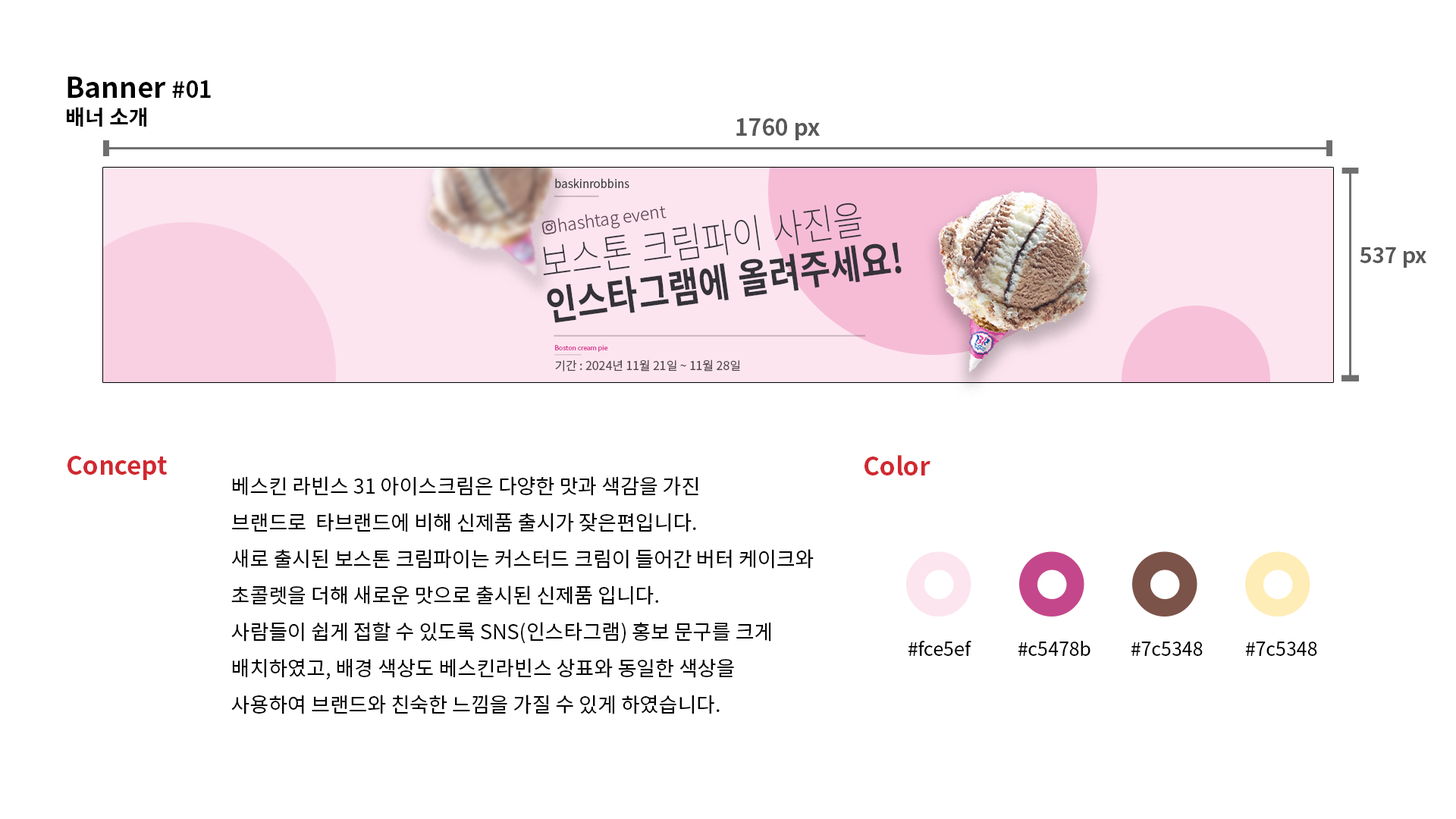
<style>
.page{position:relative;width:1456px;height:819px;background:#ffffff}
.page>*{position:absolute;margin:0}
.t1{font:28.1px/27.3px "NotoSansCJKkr-Bold";color:#000000}
.t2{font:22.7px/27.3px "NotoSansCJKkr-Bold";color:#000000}
.t3{font:21.2px/27.3px "NotoSansCJKkr-Bold";color:#000000}
.t4{font:22.7px "NotoSansCJKkr-Bold";color:#585858}
.t5{font:11.3px "NotoSansCJKkr-Regular";color:#3c3c3c}
.t6{font:40.1px/43.8px "NotoSansCJKkr-Bold";color:#353239;scale:0.83 1}
.t7{font:40.1px/43.8px "NotoSansCJKkr-Thin";color:#353239;scale:0.83 1}
.t8{font:17.2px "NotoSansCJKkr-Light";color:#5a404d}
.t9{font:21.2px "NotoSansCJKkr-Bold";color:#585858}
.t10{font:6.6px "NotoSansCJKkr-Regular";color:#da3c93}
.t11{font:12px "NotoSansCJKkr-Regular";color:#534a4e}
.t12{font:25px "NotoSansCJKkr-Bold";color:#d12830}
.t13{font:20.5px/36.4px "NotoSansCJKkr-Regular";color:#000000}
.t14{font:19px "NotoSansCJKkr-Regular";color:#000000}
</style>
<div class="page">
<p class="t1" style="left:67px;top:77px;width:144px;height:50px">Banner <span class="t2">#01<br></span><span class="t3">배너 소개</span></p>
<p class="t4" style="left:736px;top:118px;width:84px;height:22px">1760 px</p>
<p class="t5" style="left:555px;top:178px;width:74px;height:10px">baskinrobbins</p>
<p class="t6" style="left:543px;top:203px;width:359px;height:120px;rotate:-8deg"><span class="t7">보스톤 크림파이 사진을 <br></span>인스타그램에 올려주세요!</p>
<p class="t8" style="left:557px;top:206px;width:110px;height:26px;rotate:-8deg">hashtag event</p>
<p class="t9" style="left:1360px;top:247px;width:66px;height:21px">537 px</p>
<p class="t10" style="left:555px;top:345px;width:53px;height:7px">Boston cream pie</p>
<p class="t11" style="left:555px;top:359px;width:185px;height:13px">기간 : 2024년 11월 21일 ~ 11월 28일</p>
<p class="t12" style="left:67px;top:456px;width:100px;height:24px">Concept</p>
<p class="t12" style="left:864px;top:455px;width:66px;height:20px">Color</p>
<p class="t13" style="left:231px;top:476px;width:583px;height:238px">베스킨 라빈스 31 아이스크림은 다양한 맛과 색감을 가진 <br>브랜드로  타브랜드에 비해 신제품 출시가 잦은편입니다.<br>새로 출시된 보스톤 크림파이는 커스터드 크림이 들어간 버터 케이크와 <br>초콜렛을 더해 새로운 맛으로 출시된 신제품 입니다.<br>사람들이 쉽게 접할 수 있도록 SNS(인스타그램) 홍보 문구를 크게<br>배치하였고, 배경 색상도 베스킨라빈스 상표와 동일한 색상을<br>사용하여 브랜드와 친숙한 느낌을 가질 수 있게 하였습니다.</p>
<p class="t14" style="left:908px;top:640px;width:63px;height:16px">#fce5ef</p>
<p class="t14" style="left:1018px;top:641px;width:72px;height:15px">#c5478b</p>
<p class="t14" style="left:1131px;top:642px;width:72px;height:14px">#7c5348</p>
<p class="t14" style="left:1245px;top:642px;width:72px;height:14px">#7c5348</p>
</div>
